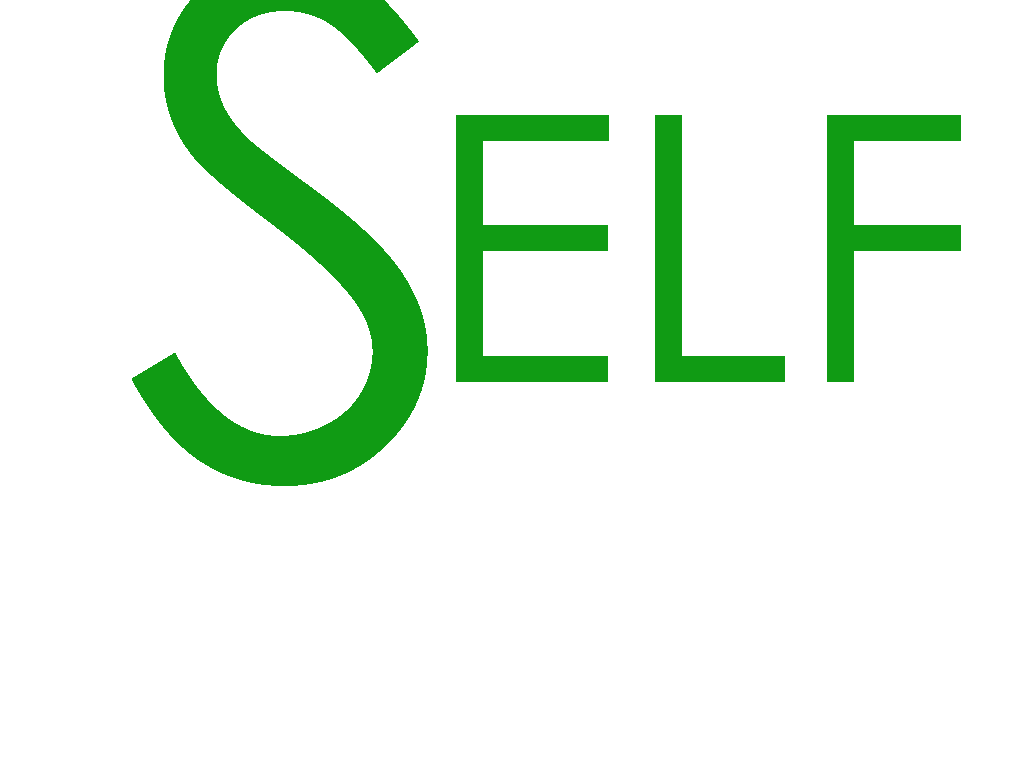
<style>
.page{position:relative;width:1024px;height:768px;background:#ffffff}
.page>*{position:absolute;margin:0}
.t1{font:372px "CenturyGothic";color:#109b14;text-transform:uppercase}
</style>
<div class="page">
<p class="t1" style="left:456px;top:115px;width:505px;height:267px">elf</p>
</div>
